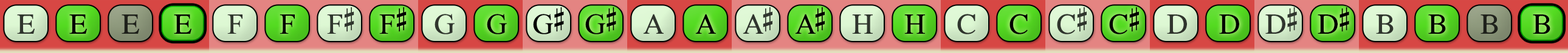
<style>
.page{position:relative;width:1568px;height:53px}
.page>*{position:absolute;margin:0}
.t1{font:29.2px "OpusChords";color:#30362e}
.t2{font:29.2px "OpusChords";color:#000000}
.t3{font:29.2px "OpusChords";color:#1f211b}
.t4{font:29.2px "OpusChords";color:#30352d}
.t5{font:29.2px "OpusChords";color:#2f352d}
.t6{font:29.2px "OpusChords";letter-spacing:-0.025em;color:#000000}
.t7{font:29.2px "OpusChords";letter-spacing:-0.1em;color:#2f352d}
.t8{font:29.2px "OpusChords";letter-spacing:-0.1em;color:#000000}
.t9{font:29.2px "OpusChords";letter-spacing:-0.025em;color:#2f352d}
</style>
<div class="page">
<p class="t1" style="left:17px;top:15px;width:18px;height:19px">E</p>
<p class="t2" style="left:69px;top:15px;width:18px;height:19px">E</p>
<p class="t3" style="left:122px;top:15px;width:17px;height:19px">E</p>
<p class="t2" style="left:174px;top:15px;width:17px;height:19px">E</p>
<p class="t1" style="left:227px;top:15px;width:15px;height:19px">F</p>
<p class="t2" style="left:280px;top:15px;width:15px;height:19px">F</p>
<p class="t4" style="left:327px;top:7px;width:27px;height:27px">F#</p>
<p class="t2" style="left:379px;top:7px;width:28px;height:27px">F#</p>
<p class="t5" style="left:435px;top:14px;width:20px;height:21px">G</p>
<p class="t2" style="left:487px;top:14px;width:20px;height:21px">G</p>
<p class="t6" style="left:533px;top:7px;width:31px;height:28px">G#</p>
<p class="t6" style="left:585px;top:7px;width:31px;height:28px">G#</p>
<p class="t5" style="left:643px;top:14px;width:21px;height:20px">A</p>
<p class="t2" style="left:695px;top:14px;width:21px;height:20px">A</p>
<p class="t7" style="left:743px;top:7px;width:29px;height:27px">A#</p>
<p class="t8" style="left:795px;top:7px;width:30px;height:27px">A#</p>
<p class="t4" style="left:852px;top:15px;width:21px;height:19px">H</p>
<p class="t2" style="left:904px;top:15px;width:21px;height:19px">H</p>
<p class="t1" style="left:957px;top:14px;width:18px;height:21px">C</p>
<p class="t2" style="left:1009px;top:14px;width:19px;height:21px">C</p>
<p class="t5" style="left:1057px;top:7px;width:30px;height:28px">C#</p>
<p class="t2" style="left:1109px;top:7px;width:30px;height:28px">C#</p>
<p class="t5" style="left:1167px;top:15px;width:20px;height:19px">D</p>
<p class="t2" style="left:1219px;top:15px;width:20px;height:19px">D</p>
<p class="t9" style="left:1265px;top:7px;width:32px;height:27px">D#</p>
<p class="t6" style="left:1318px;top:7px;width:31px;height:27px">D#</p>
<p class="t4" style="left:1376px;top:15px;width:18px;height:19px">B</p>
<p class="t2" style="left:1428px;top:15px;width:18px;height:19px">B</p>
<p class="t3" style="left:1480px;top:15px;width:18px;height:19px">B</p>
<p class="t2" style="left:1533px;top:15px;width:17px;height:19px">B</p>
</div>
